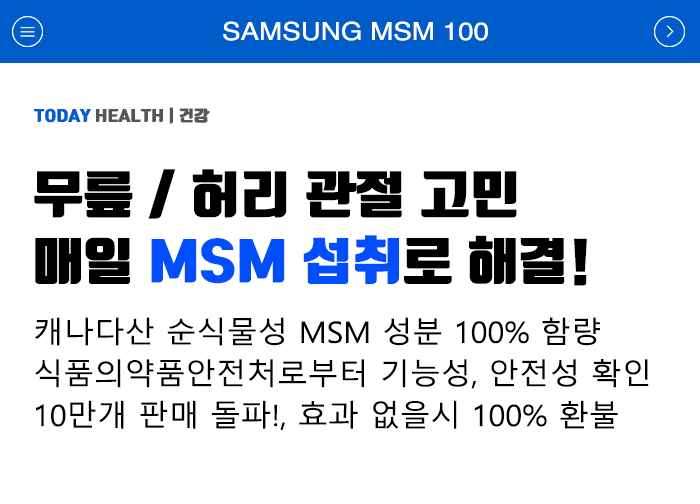
<style>
.page{position:relative;width:700px;height:504px;background:#ffffff}
.page>*{position:absolute;margin:0}
.t1{font:25px "Helvetica";color:#ffffff;scale:1.11 1}
.t2{font:15px "TmonMonsoriOTFBlack";color:#565657;scale:1.11 1}
.t3{font:15px "TmonMonsoriOTFBlack";color:#055ecd;scale:1.11 1}
.t4{font:50px/66.7px "TmonMonsoriOTFBlack";color:#000000;scale:1.11 1}
.t5{font:50px/66.7px "TmonMonsoriOTFBlack";color:#014efc;scale:1.11 1}
.t6{font:29.4px/41.6px "MalgunGothic";color:#000000;scale:1.04 1}
</style>
<div class="page">
<p class="t1" style="left:223px;top:21px;width:265px;height:20px">SAMSUNG MSM 100</p>
<p class="t2" style="left:34px;top:107px;width:176px;height:17px"><span class="t3">TODAY </span>HEALTH | 건강</p>
<p class="t4" style="left:34px;top:169px;width:553px;height:117px">무릎 / 허리 관절 고민<br>매일 <span class="t5">MSM 섭취</span>로 해결!</p>
<p class="t6" style="left:35px;top:317px;width:614px;height:113px">캐나다산 순식물성 MSM 성분 100% 함량<br>식품의약품안전처로부터 기능성, 안전성 확인<br>10만개 판매 돌파!, 효과 없을시 100% 환불</p>
</div>
